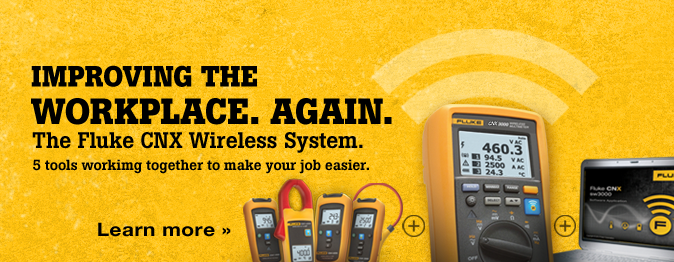
<style>
.page{position:relative;width:674px;height:262px}
.page>*{position:absolute;margin:0}
.t1{font:29px "BotonPro-Bold";letter-spacing:-0.005em;color:#000000;text-transform:uppercase}
.t2{font:36px "BotonPro-Bold";letter-spacing:-0.005em;color:#000000;text-transform:uppercase}
.t3{font:14.5px "BotonPro-Medium";letter-spacing:-0.01em;color:#000000}
.t4{font:22.4px "BotonPro-Medium";letter-spacing:-0.01em;color:#000000}
.t5{font:18.5px "HelveticaNeueLTCYR-Bd";letter-spacing:0.018em;color:#000000;scale:1.13 1}
</style>
<div class="page">
<p class="t1" style="left:31px;top:65px;width:226px;height:22px">improving the</p>
<p class="t2" style="left:31px;top:98px;width:361px;height:27px">workplace. again.</p>
<p class="t3" style="left:32px;top:132px;width:337px;height:42px"><span class="t4">The Fluke CNX Wireless System.<br></span>5 tools workimg together to make your job easier.</p>
<p class="t5" style="left:98px;top:222px;width:133px;height:15px">Learn more »</p>
</div>
